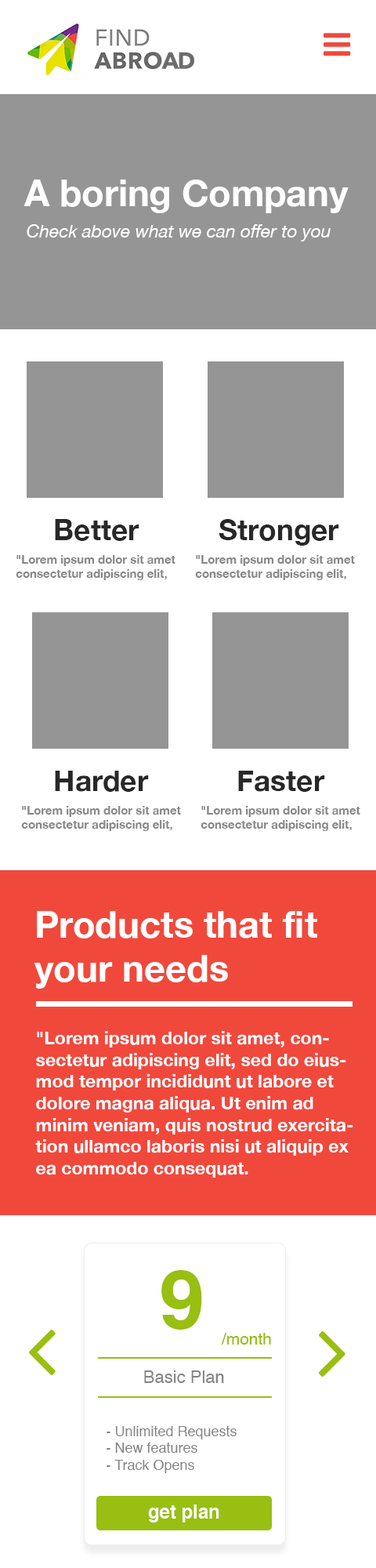
<style>
.page{position:relative;width:376px;height:1568px;background:#ffffff}
.page>*{position:absolute;margin:0}
.t1{font:36.5px "HelveticaNeue-Bold";color:#ffffff}
.t2{font:17.9px "HelveticaNeue-Italic";color:#ffffff}
.t3{font:29px "HelveticaNeue-Bold";color:#282828}
.t4{font:11.8px "HelveticaNeue-Bold";color:#888888}
.t5{font:36.8px "HelveticaNeue-Bold";color:#ffffff}
.t6{font:18px "HelveticaNeue-Bold";color:#ffffff}
.t7{font:81.5px "Helvetica-Bold";color:#98bf11}
.t8{font:16.5px "Helvetica";color:#98bf11}
.t9{font:17.2px "Helvetica";color:#848484}
.t10{font:14.1px "Helvetica";color:#848484}
.t11{font:18.8px "Helvetica-Bold";color:#ffffff}
</style>
<div class="page">
<p class="t1" style="left:24px;top:180px;width:325px;height:33px">A boring Company</p>
<p class="t2" style="left:27px;top:224px;width:304px;height:17px">Check above what we can offer to you</p>
<p class="t3" style="left:55px;top:519px;width:85px;height:22px">Better</p>
<p class="t3" style="left:219px;top:519px;width:120px;height:27px">Stronger</p>
<p class="t4" style="left:16px;top:555px;width:160px;height:25px">"Lorem ipsum dolor sit amet<br>consectetur adipiscing elit,</p>
<p class="t4" style="left:195px;top:555px;width:160px;height:25px">"Lorem ipsum dolor sit amet<br>consectetur adipiscing elit,</p>
<p class="t3" style="left:55px;top:771px;width:94px;height:21px">Harder</p>
<p class="t3" style="left:238px;top:771px;width:87px;height:21px">Faster</p>
<p class="t4" style="left:21px;top:806px;width:160px;height:25px">"Lorem ipsum dolor sit amet<br>consectetur adipiscing elit,</p>
<p class="t4" style="left:201px;top:806px;width:160px;height:25px">"Lorem ipsum dolor sit amet<br>consectetur adipiscing elit,</p>
<p class="t5" style="left:34px;top:911px;width:284px;height:78px">Products that fit <br>your needs</p>
<p class="t6" style="left:35px;top:1031px;width:319px;height:147px">"Lorem ipsum dolor sit amet, consectetur adipiscing elit, sed do eiusmod tempor incididunt ut labore et dolore magna aliqua. Ut enim ad minim veniam, quis nostrud exercitation ullamco laboris nisi ut aliquip ex ea commodo consequat.</p>
<p class="t7" style="left:162px;top:1270px;width:40px;height:60px">9</p>
<p class="t8" style="left:221px;top:1333px;width:50px;height:12px">/month</p>
<p class="t9" style="left:144px;top:1370px;width:80px;height:13px">Basic Plan</p>
<p class="t10" style="left:107px;top:1426px;width:130px;height:47px">- Unlimited Requests<br>- New features<br>- Track Opens</p>
<p class="t11" style="left:148px;top:1504px;width:72px;height:19px">get plan</p>
</div>
